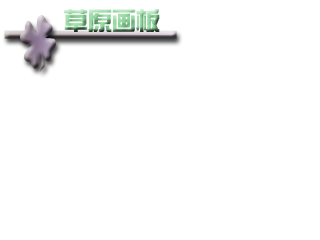
<style>
.page{position:relative;width:320px;height:240px;background:#ffffff}
.page>*{position:absolute;margin:0}
.t1{font:24px "ÎÄ¶¦ÐÂÒÕÌå¼ò-Regular"}
</style>
<div class="page">
<p class="t1" style="left:64px;top:9px;width:96px;height:23px">草原画板</p>
</div>
